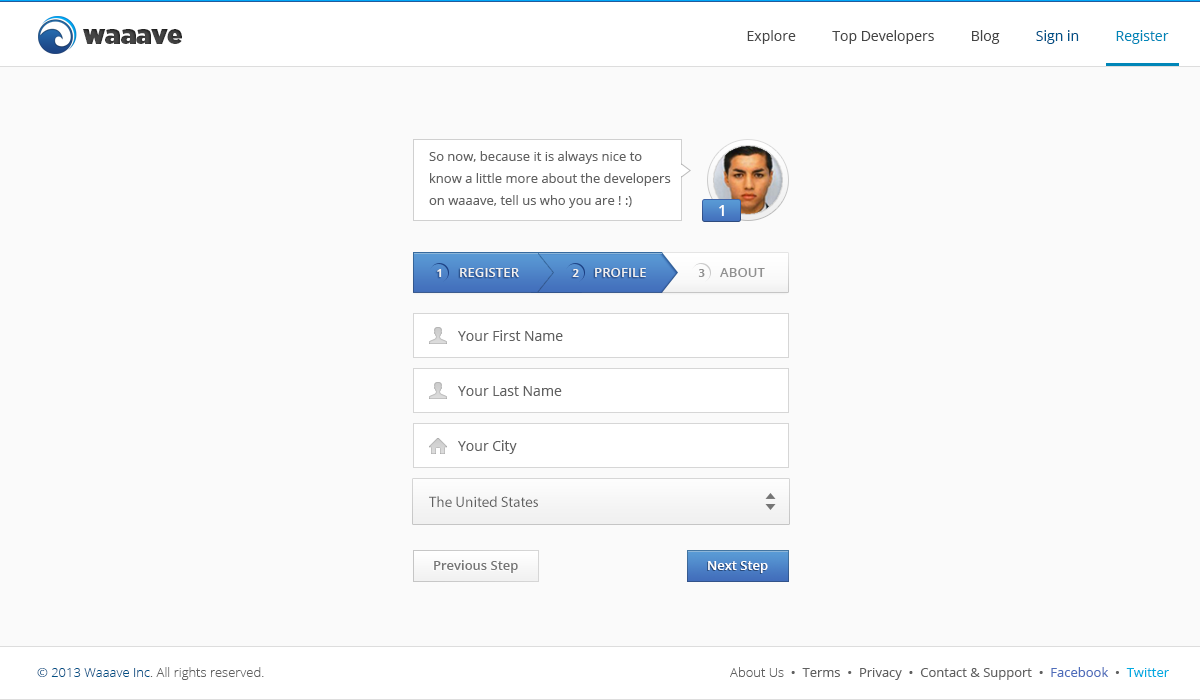
<style>
.page{position:relative;width:1200px;height:700px;background:#fafafa}
.page>*{position:absolute;margin:0}
.t1{font:25.9px "Gotham-Ultra";color:#454545}
.t2{font:14px "OpenSans";color:#454545}
.t3{font:14px "OpenSans";color:#005086}
.t4{font:14px "OpenSans";color:#0086b8}
.t5{font:13px/22px "OpenSans";color:#606060}
.t6{font:15px "OpenSans-Semibold";color:#fefefe}
.t7{font:11px "OpenSans-Bold";letter-spacing:0.01em;color:#f1f1f1}
.t8{font:13px "OpenSans-Semibold";letter-spacing:0.01em;color:#f1f1f1}
.t9{font:11px "OpenSans-Bold";letter-spacing:0.01em;color:#909090}
.t10{font:13px "OpenSans-Semibold";letter-spacing:0.01em;color:#909090}
.t11{font:14px "OpenSans";color:#606060}
.t12{font:15px "MyriadPro-Regular";color:#606060}
.t13{font:13px "OpenSans-Semibold";color:#757575}
.t14{font:13px "OpenSans-Semibold";color:#ffffff}
.t15{font:13px "OpenSans-Light";color:#606060}
.t16{font:13px "OpenSans-Light";color:#005086}
.t17{font:13px "OpenSans";color:#606060}
.t18{font:13px "OpenSans";color:#4e6dbb}
.t19{font:13px "OpenSans";color:#01abe1}
</style>
<div class="page">
<p class="t1" style="left:83px;top:29px;width:99px;height:15px">waaave</p>
<p class="t2" style="left:747px;top:30px;width:422px;height:14px">Explore          Top Developers          Blog          <span class="t3">Sign in          </span><span class="t4">Register</span></p>
<p class="t5" style="left:429px;top:151px;width:242px;height:57px">So now, because it is always nice to<br>know a little more about the developers<br>on waaave, tell us who you are ! :)</p>
<p class="t6" style="left:719px;top:205px;width:5px;height:11px">1</p>
<p class="t7" style="left:437px;top:269px;width:5px;height:8px">1</p>
<p class="t8" style="left:460px;top:268px;width:59px;height:9px">REGISTER</p>
<p class="t7" style="left:572px;top:269px;width:7px;height:8px">2</p>
<p class="t8" style="left:595px;top:268px;width:51px;height:9px">PROFILE</p>
<p class="t9" style="left:698px;top:269px;width:7px;height:8px">3</p>
<p class="t10" style="left:720px;top:268px;width:45px;height:9px">ABOUT</p>
<p class="t11" style="left:458px;top:330px;width:105px;height:11px">Your First Name</p>
<p class="t11" style="left:458px;top:386px;width:104px;height:10px">Your Last Name</p>
<p class="t11" style="left:458px;top:440px;width:59px;height:14px">Your City</p>
<p class="t12" style="left:429px;top:496px;width:109px;height:11px">The United States</p>
<p class="t13" style="left:434px;top:560px;width:84px;height:13px">Previous Step</p>
<p class="t14" style="left:708px;top:561px;width:60px;height:12px">Next Step</p>
<p class="t15" style="left:37px;top:667px;width:227px;height:13px"><span class="t16">© 2013 Waaave Inc</span>. All rights reserved.</p>
<p class="t17" style="left:730px;top:667px;width:439px;height:13px"><span class="t15">About Us  </span>•  Terms  •  Privacy  •  Contact &amp; Support  •  <span class="t18">Facebook</span>  •  <span class="t19">Twitter</span></p>
</div>
